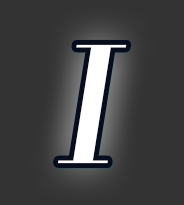
<style>
.page{position:relative;width:184px;height:205px;background:#333333}
.page>*{position:absolute;margin:0}
.t1{font:160px "KochoStd-Heavy";letter-spacing:-0.08em;color:#ffffff;font-style:italic;scale:0.9 1}
</style>
<div class="page">
<p class="t1" style="left:58px;top:44px;width:69px;height:120px">I</p>
</div>
